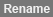
<style>
.page{position:relative;width:53px;height:17px;background:#777777}
.page>*{position:absolute;margin:0}
.t1{font:12px "Arial-BoldMT";color:#eeeeee}
</style>
<div class="page">
<p class="t1" style="left:4px;top:4px;width:46px;height:9px">Rename</p>
</div>
